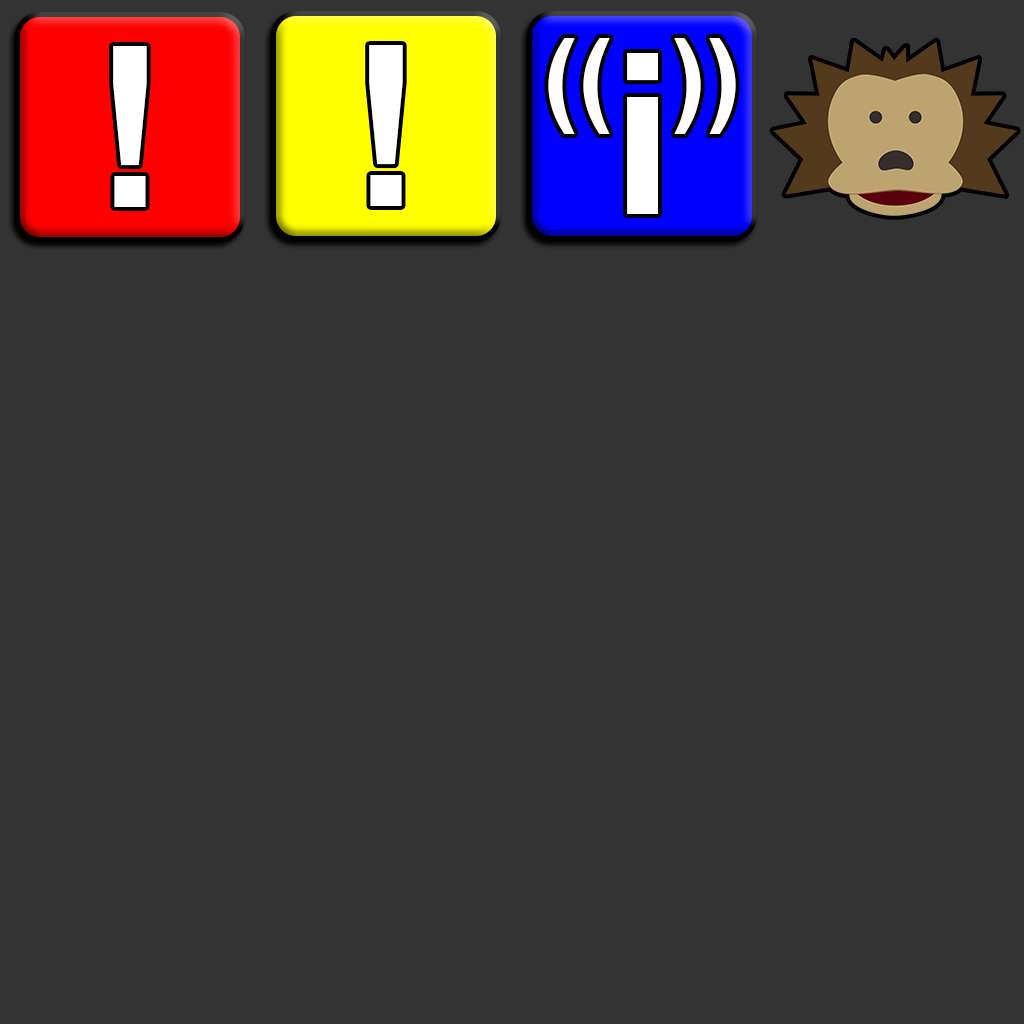
<style>
.page{position:relative;width:1024px;height:1024px;background:#333333}
.page>*{position:absolute;margin:0}
.t1{font:105.2px "Arial-BoldMT";color:#ffffff}
.t2{font:225px "Arial-BoldMT";color:#ffffff}
.t3{font:225.4px "Arial-BoldMT";color:#ffffff}
</style>
<div class="page">
<p class="t1" style="left:548px;top:38px;width:188px;height:96px">((  ))</p>
<p class="t2" style="left:113px;top:46px;width:34px;height:161px">!</p>
<p class="t2" style="left:369px;top:45px;width:34px;height:161px">!</p>
<p class="t3" style="left:627px;top:53px;width:31px;height:161px">i</p>
</div>
